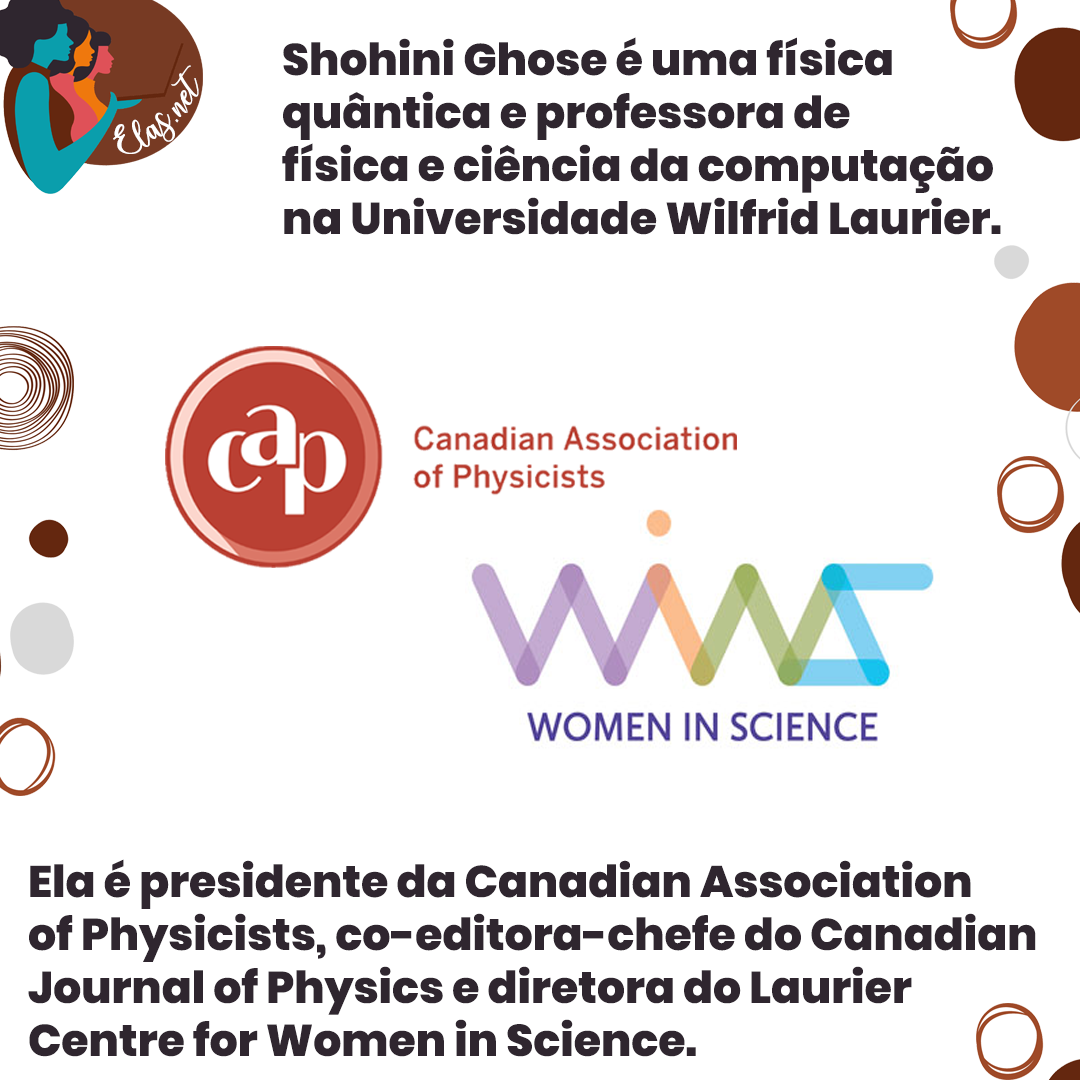
<style>
.page{position:relative;width:1080px;height:1080px;background:#ffffff}
.page>*{position:absolute;margin:0}
.t1{font:44.1px "Poppins-ExtraBold";color:#2f262f}
.t2{font:25px "charlinda-Regular";color:#ffffff;scale:1.18 1}
</style>
<div class="page">
<p class="t1" style="left:282px;top:37px;width:719px;height:198px">Shohini Ghose é uma física <br>quântica e professora de <br>física e ciência da computação <br>na Universidade Wilfrid Laurier.</p>
<p class="t2" style="left:113px;top:65px;width:86px;height:89px;rotate:-43deg">Elas.net</p>
<p class="t1" style="left:28px;top:859px;width:1008px;height:198px">Ela é presidente da Canadian Association <br>of Physicists, co-editora-chefe do Canadian <br>Journal of Physics e diretora do Laurier <br>Centre for Women in Science.</p>
</div>
